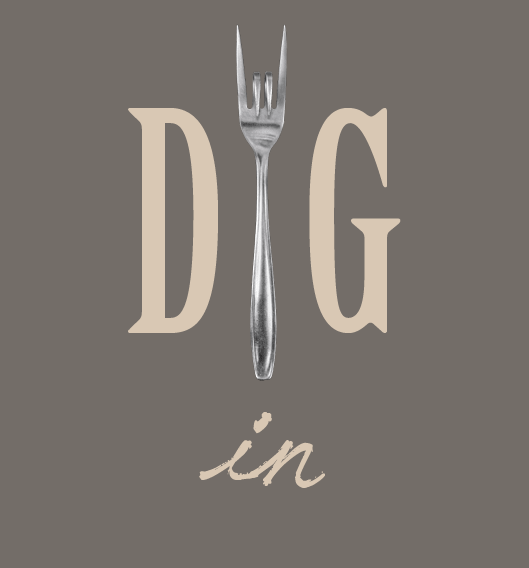
<style>
.page{position:relative;width:529px;height:568px;background:#736d68}
.page>*{position:absolute;margin:0}
.t1{font:300px "Birch";color:#d9c8b4}
.t2{font:200px "JellykaSaint-AndrewsQueen";color:#d9c8b4}
</style>
<div class="page">
<p class="t1" style="left:128px;top:108px;width:90px;height:225px">D</p>
<p class="t1" style="left:309px;top:108px;width:92px;height:225px">G</p>
<p class="t2" style="left:199px;top:412px;width:126px;height:76px">in</p>
</div>
